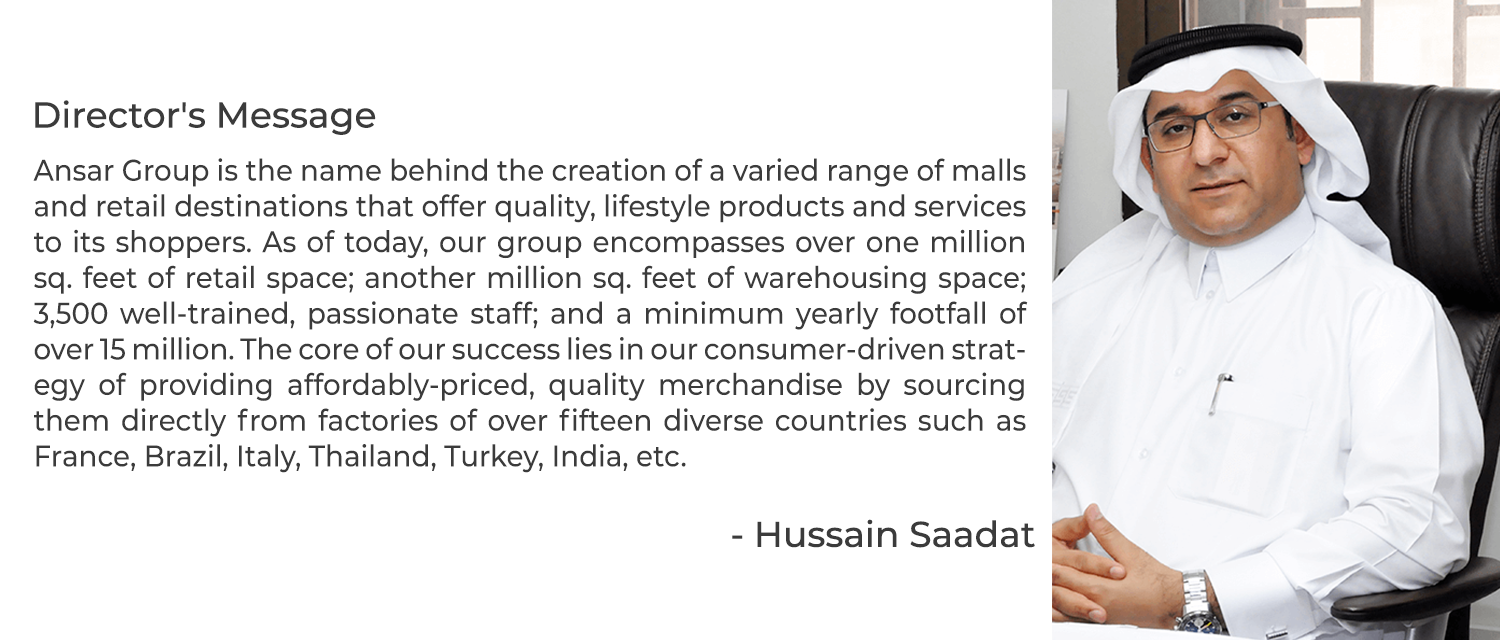
<style>
.page{position:relative;width:1500px;height:640px;background:#ffffff}
.page>*{position:absolute;margin:0}
.t1{font:36px "Montserrat-Medium";color:#3b3b3b}
.t2{font:29.8px "Montserrat-Medium";color:#3b3b3b;scale:0.93 1}
</style>
<div class="page">
<p class="t1" style="left:35px;top:100px;width:341px;height:35px">Director's Message</p>
<p class="t2" style="left:33px;top:158px;width:995px;height:315px;text-align:justify">Ansar Group is the name behind the creation of a varied range of malls and retail destinations that offer quality, lifestyle products and services to its shoppers. As of today, our group encompasses over one million <br>sq. feet of retail space; another million sq. feet of warehousing space; 3,500 well-trained, passionate staff; and a minimum yearly footfall of over 15 million. The core of our success lies in our consumer-driven strategy of providing affordably-priced, quality merchandise by sourcing them directly from factories of over fifteen diverse countries such as France, Brazil, Italy, Thailand, Turkey, India, etc.</p>
<p class="t1" style="left:732px;top:519px;width:303px;height:29px">- Hussain Saadat</p>
</div>
